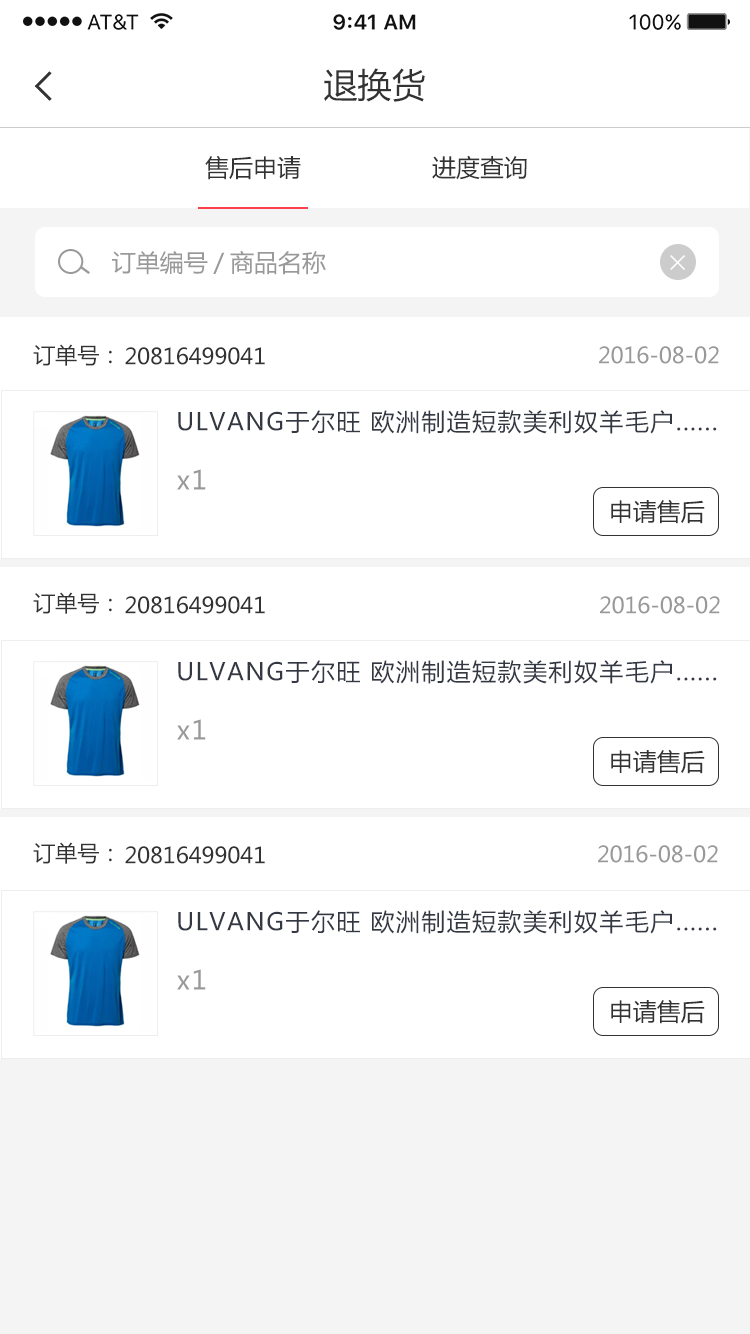
<style>
.page{position:relative;width:750px;height:1334px;background:#ffffff}
.page>*{position:absolute;margin:0}
.t1{font:34px "MicrosoftYaHei";color:#333333}
.t2{font:24px "MicrosoftYaHei";color:#333333}
.t3{font:24px "MicrosoftYaHei";color:#999999}
.t4{font:22px "MicrosoftYaHei";color:#333333}
.t5{font:22px "MicrosoftYaHei";color:#999999}
.t6{font:24px "MicrosoftYaHei";letter-spacing:0.06em;color:#343843}
.t7{font:26px "MicrosoftYaHei";letter-spacing:0.06em;color:#999999}
</style>
<div class="page">
<p class="t1" style="left:324px;top:68px;width:101px;height:34px">退换货</p>
<p class="t2" style="left:205px;top:155px;width:96px;height:25px">售后申请</p>
<p class="t2" style="left:432px;top:155px;width:95px;height:25px">进度查询</p>
<p class="t3" style="left:112px;top:250px;width:214px;height:25px">订单编号/商品名称</p>
<p class="t4" style="left:33px;top:344px;width:79px;height:22px">订单号：</p>
<p class="t4" style="left:125px;top:347px;width:140px;height:18px">20816499041</p>
<p class="t5" style="left:599px;top:346px;width:120px;height:18px">2016-08-02</p>
<p class="t6" style="left:178px;top:410px;width:539px;height:24px">ULVANG于尔旺 欧洲制造短款美利奴羊毛户......</p>
<p class="t7" style="left:177px;top:469px;width:29px;height:21px">x1</p>
<p class="t2" style="left:611px;top:499px;width:94px;height:25px">申请售后</p>
<p class="t4" style="left:33px;top:592px;width:79px;height:22px">订单号：</p>
<p class="t4" style="left:125px;top:596px;width:140px;height:18px">20816499041</p>
<p class="t5" style="left:600px;top:596px;width:120px;height:18px">2016-08-02</p>
<p class="t6" style="left:178px;top:660px;width:539px;height:24px">ULVANG于尔旺 欧洲制造短款美利奴羊毛户......</p>
<p class="t7" style="left:177px;top:719px;width:29px;height:21px">x1</p>
<p class="t2" style="left:611px;top:749px;width:94px;height:25px">申请售后</p>
<p class="t4" style="left:33px;top:842px;width:79px;height:22px">订单号：</p>
<p class="t4" style="left:125px;top:846px;width:140px;height:18px">20816499041</p>
<p class="t5" style="left:598px;top:845px;width:120px;height:18px">2016-08-02</p>
<p class="t6" style="left:178px;top:910px;width:539px;height:24px">ULVANG于尔旺 欧洲制造短款美利奴羊毛户......</p>
<p class="t7" style="left:177px;top:969px;width:29px;height:21px">x1</p>
<p class="t2" style="left:611px;top:999px;width:94px;height:25px">申请售后</p>
</div>
